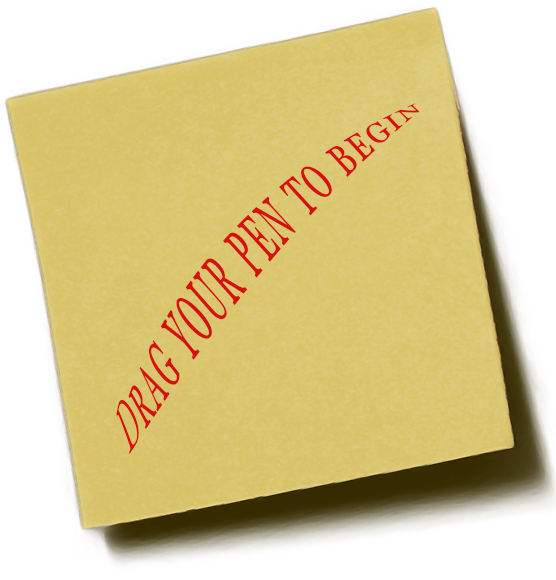
<style>
.page{position:relative;width:556px;height:580px;background:#ffffff}
.page>*{position:absolute;margin:0}
.t1{font:33.2px "Georgia-Italic";letter-spacing:0.075em;color:#d80f0f;font-variant:small-caps;scale:1.06 1}
</style>
<div class="page">
<p class="t1" style="left:116px;top:103px;width:304px;height:351px;rotate:-49deg">Drag your pen to begin</p>
</div>
